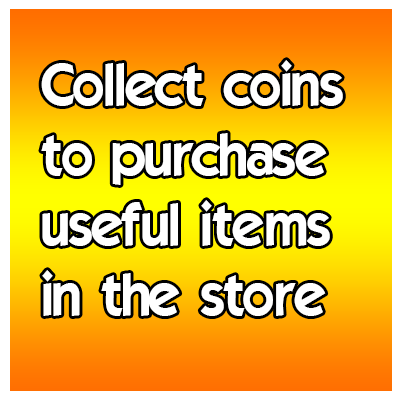
<style>
.page{position:relative;width:400px;height:400px}
.page>*{position:absolute;margin:0}
.t1{font:58.3px "ELEGANCE";color:#ffffff}
</style>
<div class="page">
<p class="t1" style="left:41px;top:60px;width:302px;height:256px">Collect coins<br>to purchase<br>useful items<br>in the store</p>
</div>
